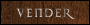
<style>
.page{position:relative;width:90px;height:25px}
.page>*{position:absolute;margin:0}
.t1{font:13px "Mason-Regular";letter-spacing:0.08em;color:#c8c8c8;scale:0.92 1}
</style>
<div class="page">
<p class="t1" style="left:16px;top:8px;width:60px;height:11px">VENDER</p>
</div>
